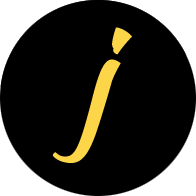
<style>
.page{position:relative;width:196px;height:196px;background:#000000}
.page>*{position:absolute;margin:0}
.t1{font:123.1px "KaushanScript-Regular";color:#fdd549;font-weight:bold}
</style>
<div class="page">
<p class="t1" style="left:52px;top:27px;width:80px;height:136px">j</p>
</div>
